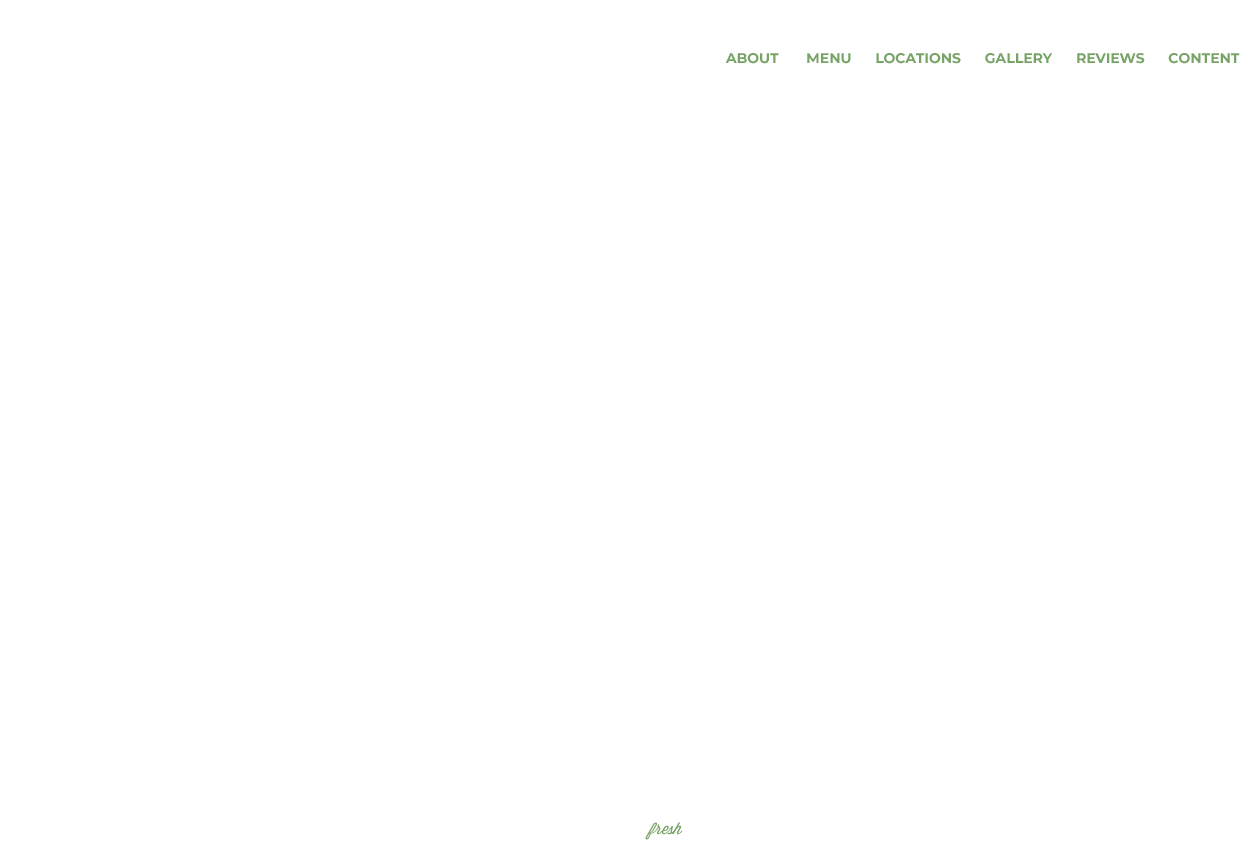
<style>
.page{position:relative;width:1240px;height:868px;background:#ffffff}
.page>*{position:absolute;margin:0}
.t1{font:14px "Montserrat-Bold";color:#77a466;text-transform:uppercase}
.t2{font:16px "Wisdom-Script";color:#77a466}
</style>
<div class="page">
<p class="t1" style="left:725px;top:53px;width:515px;height:11px">about       menu      locations      GALLERY      REVIEWS      CONTENT</p>
<p class="t2" style="left:645px;top:822px;width:38px;height:18px">fresh</p>
</div>
